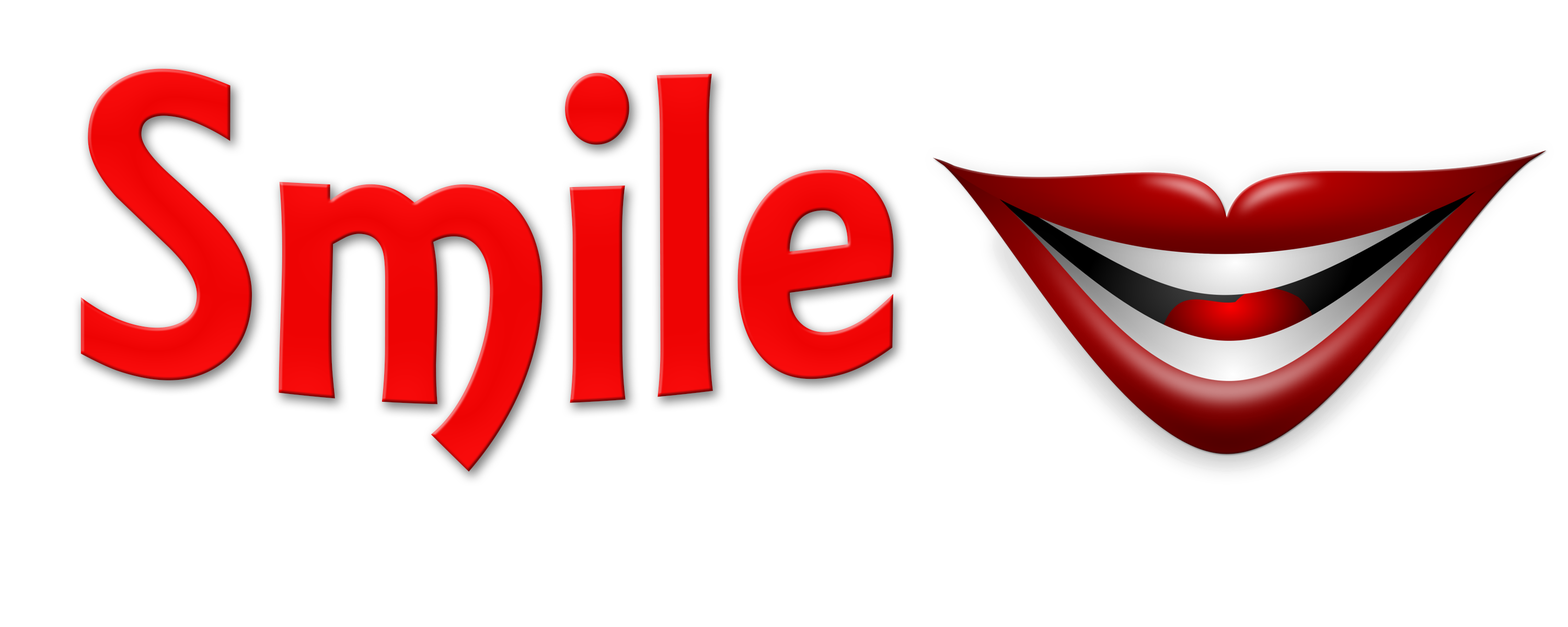
<style>
.page{position:relative;width:1568px;height:627px;background:#ffffff}
.page>*{position:absolute;margin:0}
.t1{font:446.5px "ARESSENCE";color:#f10505}
</style>
<div class="page">
<p class="t1" style="left:80px;top:68px;width:814px;height:404px">Smile</p>
</div>
